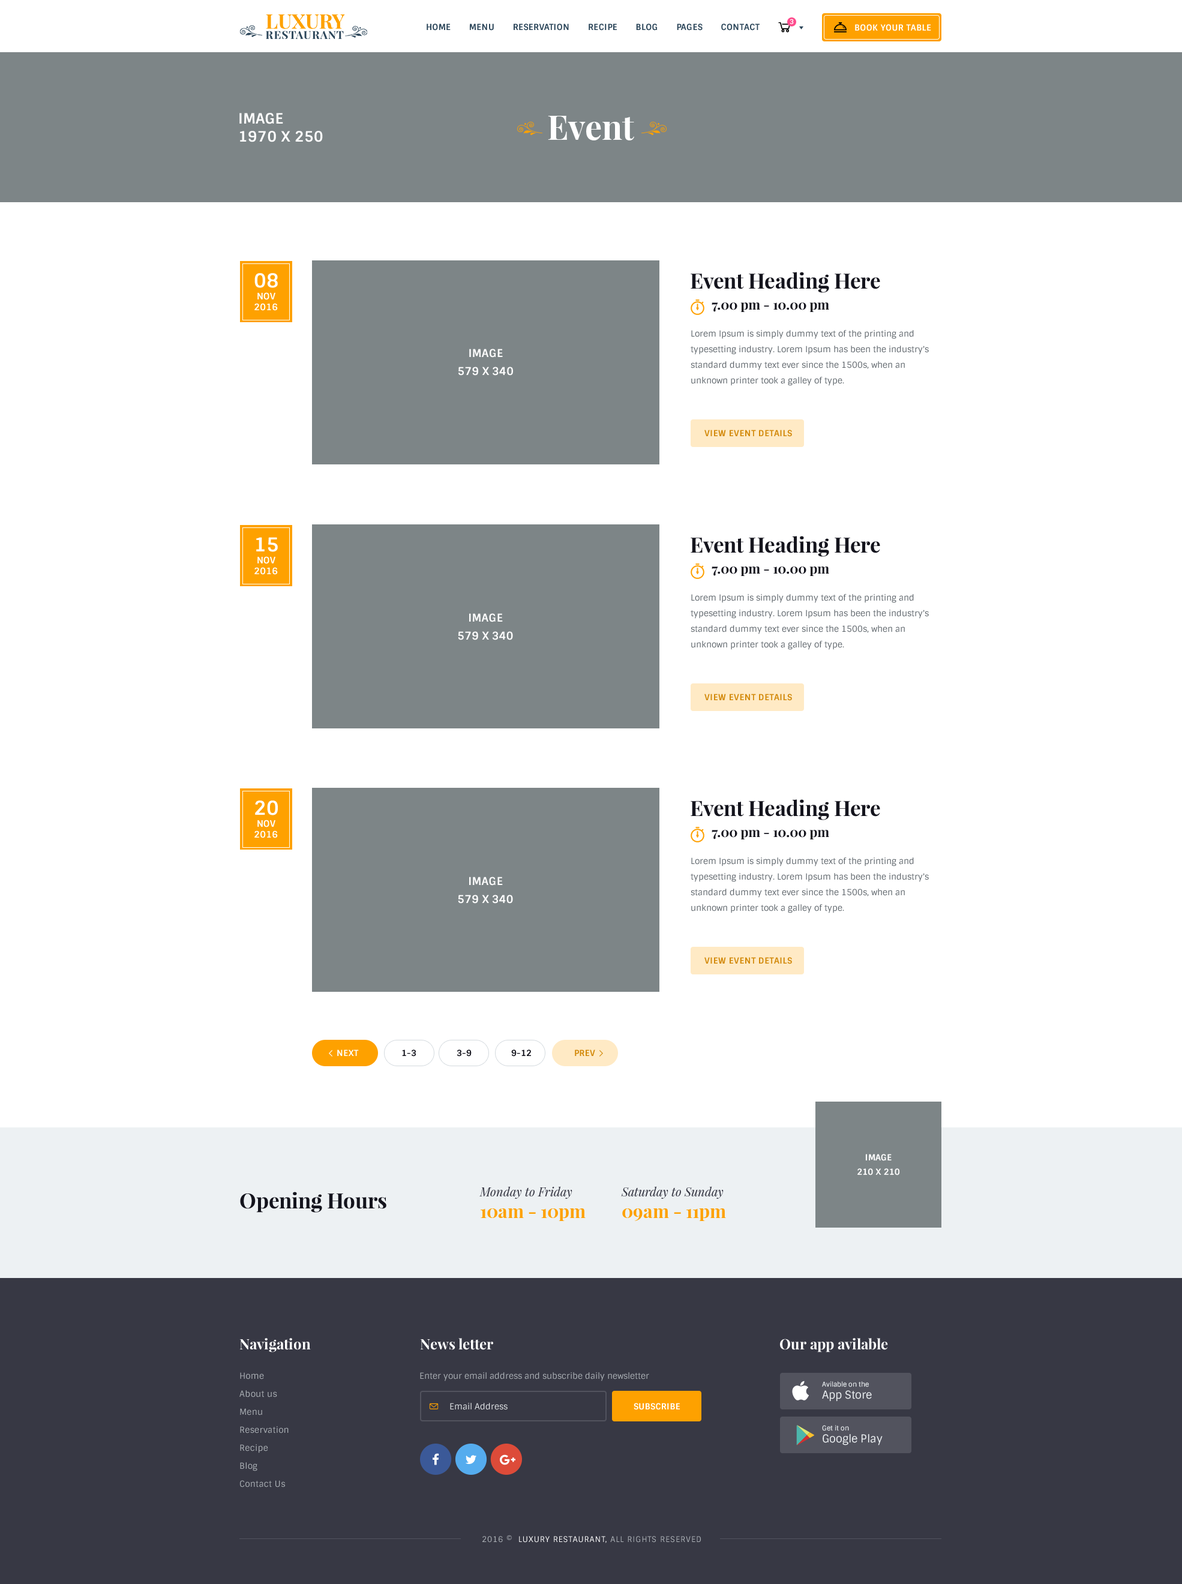
<style>
.page{position:relative;width:1182px;height:1584px;background:#ffffff}
.page>*{position:absolute;margin:0}
.t1{font:8.4px "Sintony-Bold";letter-spacing:0.025em;color:#2c465a;text-transform:uppercase}
.t2{font:6.6px "Sintony-Bold";letter-spacing:0.025em;color:#ffffff;text-transform:uppercase}
.t3{font:8.4px "Sintony-Bold";letter-spacing:0.025em;color:#ffffff;text-transform:uppercase}
.t4{font:14.4px/18px "Sintony-Bold";letter-spacing:0.005em;color:#ffffff;text-transform:uppercase}
.t5{font:33.6px "PlayfairDisplay-Bold";color:#ffffff}
.t6{font:19.2px "Sintony-Bold";color:#ffffff}
.t7{font:21px "PlayfairDisplay-Bold";color:#14141d}
.t8{font:9px/10.8px "Sintony-Bold";color:#ffffff;text-transform:uppercase}
.t9{font:13.2px "PlayfairDisplay-Bold";color:#14141d}
.t10{font:8.4px/15.6px "Sintony";color:#5c6369}
.t11{font:10.8px/18px "Sintony-Bold";letter-spacing:0.005em;color:#ffffff;text-transform:uppercase}
.t12{font:8.4px "Sintony-Bold";letter-spacing:0.025em;color:#d38a0c;text-transform:uppercase}
.t13{font:8.4px "Sintony-Bold";color:#14141d}
.t14{font:8.4px/14.4px "Sintony-Bold";letter-spacing:0.005em;color:#ffffff;text-transform:uppercase}
.t15{font:12px "PlayfairDisplay-Italic";color:#373844}
.t16{font:18px "PlayfairDisplay-Bold";color:#fea100}
.t17{font:14.4px "PlayfairDisplay-Bold";color:#ffffff}
.t18{font:8.4px/18px "Sintony";letter-spacing:0.025em;color:#adb2b7}
.t19{font:8.4px "Sintony";color:#adb2b7}
.t20{font:6.6px/12px "Sintony";color:#edf1f3}
.t21{font:10.8px/12px "Sintony";color:#edf1f3}
.t22{font:8.4px "Sintony";color:#e6e9eb}
.t23{font:7.8px "Sintony";letter-spacing:0.075em;color:#adb2b7;text-transform:uppercase}
.t24{font:7.8px "Sintony";letter-spacing:0.075em;color:#ffffff;text-transform:uppercase}
</style>
<div class="page">
<p class="t1" style="left:427px;top:23px;width:333px;height:8px">Home       menu       reservation       recipe       blog       Pages       contact</p>
<p class="t2" style="left:790px;top:19px;width:4px;height:6px">3</p>
<p class="t3" style="left:855px;top:24px;width:76px;height:7px">Book your table</p>
<p class="t4" style="left:239px;top:113px;width:84px;height:29px">Image<br>1970 x 250</p>
<p class="t5" style="left:548px;top:116px;width:86px;height:24px">Event</p>
<p class="t6" style="left:254px;top:273px;width:24px;height:15px">08</p>
<p class="t7" style="left:691px;top:272px;width:189px;height:21px">Event Heading Here</p>
<p class="t8" style="left:254px;top:292px;width:24px;height:19px;text-align:center">nov<br>2016</p>
<p class="t9" style="left:712px;top:302px;width:117px;height:10px">7.00 pm - 10.00 pm</p>
<p class="t10" style="left:691px;top:330px;width:238px;height:56px">Lorem Ipsum is simply dummy text of the printing and typesetting industry. Lorem Ipsum has been the industry's standard dummy text ever since the 1500s, when an unknown printer took a galley of type.</p>
<p class="t11" style="left:458px;top:349px;width:55px;height:27px;text-align:center">Image<br>579 x 340</p>
<p class="t12" style="left:704px;top:430px;width:88px;height:7px">view event details</p>
<p class="t6" style="left:256px;top:537px;width:22px;height:15px">15</p>
<p class="t7" style="left:691px;top:536px;width:189px;height:21px">Event Heading Here</p>
<p class="t8" style="left:254px;top:556px;width:24px;height:19px;text-align:center">nov<br>2016</p>
<p class="t9" style="left:712px;top:566px;width:117px;height:10px">7.00 pm - 10.00 pm</p>
<p class="t10" style="left:691px;top:594px;width:238px;height:56px">Lorem Ipsum is simply dummy text of the printing and typesetting industry. Lorem Ipsum has been the industry's standard dummy text ever since the 1500s, when an unknown printer took a galley of type.</p>
<p class="t11" style="left:458px;top:613px;width:55px;height:27px;text-align:center">Image<br>579 x 340</p>
<p class="t12" style="left:704px;top:694px;width:88px;height:7px">view event details</p>
<p class="t6" style="left:255px;top:800px;width:23px;height:15px">20</p>
<p class="t7" style="left:691px;top:799px;width:189px;height:21px">Event Heading Here</p>
<p class="t8" style="left:254px;top:820px;width:24px;height:18px;text-align:center">nov<br>2016</p>
<p class="t9" style="left:712px;top:830px;width:117px;height:9px">7.00 pm - 10.00 pm</p>
<p class="t10" style="left:691px;top:857px;width:238px;height:56px">Lorem Ipsum is simply dummy text of the printing and typesetting industry. Lorem Ipsum has been the industry's standard dummy text ever since the 1500s, when an unknown printer took a galley of type.</p>
<p class="t11" style="left:458px;top:877px;width:55px;height:27px;text-align:center">Image<br>579 x 340</p>
<p class="t12" style="left:704px;top:957px;width:88px;height:7px">view event details</p>
<p class="t3" style="left:337px;top:1049px;width:22px;height:7px">Next</p>
<p class="t13" style="left:402px;top:1049px;width:14px;height:8px">1-3</p>
<p class="t13" style="left:457px;top:1049px;width:15px;height:8px">3-9</p>
<p class="t13" style="left:511px;top:1049px;width:20px;height:8px">9-12</p>
<p class="t12" style="left:575px;top:1049px;width:20px;height:7px">prev</p>
<p class="t14" style="left:857px;top:1154px;width:43px;height:21px;text-align:center">Image<br>210 x 210</p>
<p class="t7" style="left:240px;top:1192px;width:146px;height:21px">Opening Hours</p>
<p class="t15" style="left:479px;top:1186px;width:107px;height:35px">Monday to Friday<br><span class="t16">10am - 10pm</span></p>
<p class="t15" style="left:621px;top:1186px;width:105px;height:35px">Saturday to Sunday<br><span class="t16">09am - 11pm</span></p>
<p class="t17" style="left:239px;top:1338px;width:72px;height:14px">Navigation</p>
<p class="t17" style="left:420px;top:1338px;width:73px;height:12px">News letter</p>
<p class="t17" style="left:780px;top:1338px;width:108px;height:14px">Our app avilable</p>
<p class="t18" style="left:239px;top:1372px;width:50px;height:115px">Home<br>About us<br>Menu<br>Reservation<br>Recipe<br>Blog<br>Contact Us</p>
<p class="t19" style="left:420px;top:1372px;width:229px;height:9px">Enter your email address and subscribe daily newsletter</p>
<p class="t20" style="left:822px;top:1381px;width:50px;height:21px">Avilable on the<br><span class="t21">App Store</span></p>
<p class="t22" style="left:450px;top:1403px;width:58px;height:7px">Email Address</p>
<p class="t3" style="left:634px;top:1403px;width:46px;height:7px">Subscribe</p>
<p class="t21" style="left:822px;top:1425px;width:61px;height:20px"><span class="t20">Get it on<br></span>Google Play</p>
<p class="t23" style="left:482px;top:1535px;width:219px;height:8px">2016 ©  <span class="t24">Luxury RestaurAnt,</span> All rights reserved</p>
</div>
